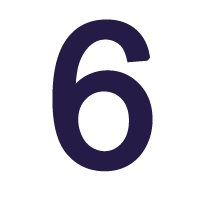
<style>
.page{position:relative;width:200px;height:200px;background:#ffffff}
.page>*{position:absolute;margin:0}
.t1{font:200px "ArialMT";color:#241b47;font-weight:bold}
</style>
<div class="page">
<p class="t1" style="left:52px;top:19px;width:101px;height:153px">6</p>
</div>
